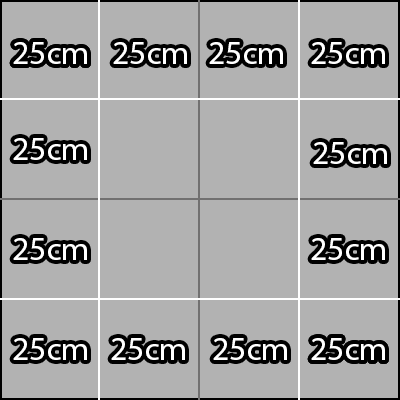
<style>
.page{position:relative;width:400px;height:400px;background:#b2b2b2}
.page>*{position:absolute;margin:0}
.t1{font:33.3px "MyriadPro-Regular";color:#ffffff}
</style>
<div class="page">
<p class="t1" style="left:13px;top:42px;width:74px;height:22px">25cm</p>
<p class="t1" style="left:13px;top:42px;width:74px;height:22px">25cm</p>
<p class="t1" style="left:113px;top:42px;width:74px;height:22px">25cm</p>
<p class="t1" style="left:209px;top:42px;width:74px;height:22px">25cm</p>
<p class="t1" style="left:311px;top:42px;width:74px;height:22px">25cm</p>
<p class="t1" style="left:13px;top:138px;width:74px;height:22px">25cm</p>
<p class="t1" style="left:313px;top:142px;width:74px;height:22px">25cm</p>
<p class="t1" style="left:13px;top:238px;width:74px;height:22px">25cm</p>
<p class="t1" style="left:311px;top:238px;width:74px;height:22px">25cm</p>
<p class="t1" style="left:13px;top:338px;width:74px;height:22px">25cm</p>
<p class="t1" style="left:111px;top:338px;width:74px;height:22px">25cm</p>
<p class="t1" style="left:213px;top:338px;width:74px;height:22px">25cm</p>
<p class="t1" style="left:311px;top:338px;width:74px;height:22px">25cm</p>
<p class="t1" style="left:311px;top:338px;width:74px;height:22px">25cm</p>
</div>
